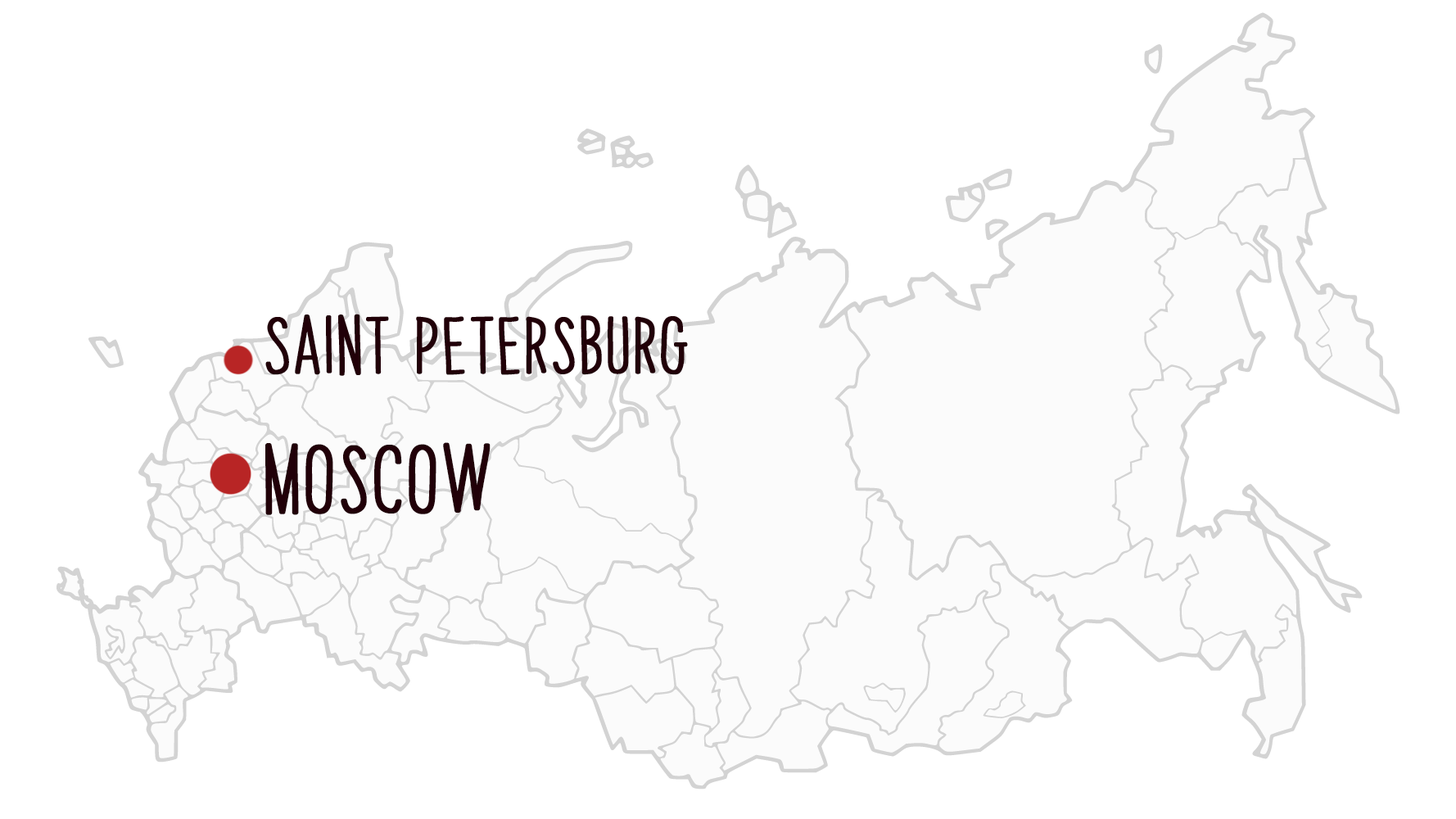
<style>
.page{position:relative;width:1456px;height:819px;background:#ffffff}
.page>*{position:absolute;margin:0}
.t1{font:49.1px "PapayaSunrise";color:#210008;font-weight:bold}
.t2{font:59px "PapayaSunrise";color:#210008;font-weight:bold}
</style>
<div class="page">
<p class="t1" style="left:265px;top:314px;width:423px;height:62px">Saint-Petersburg</p>
<p class="t2" style="left:265px;top:442px;width:226px;height:73px">Moscow</p>
</div>
